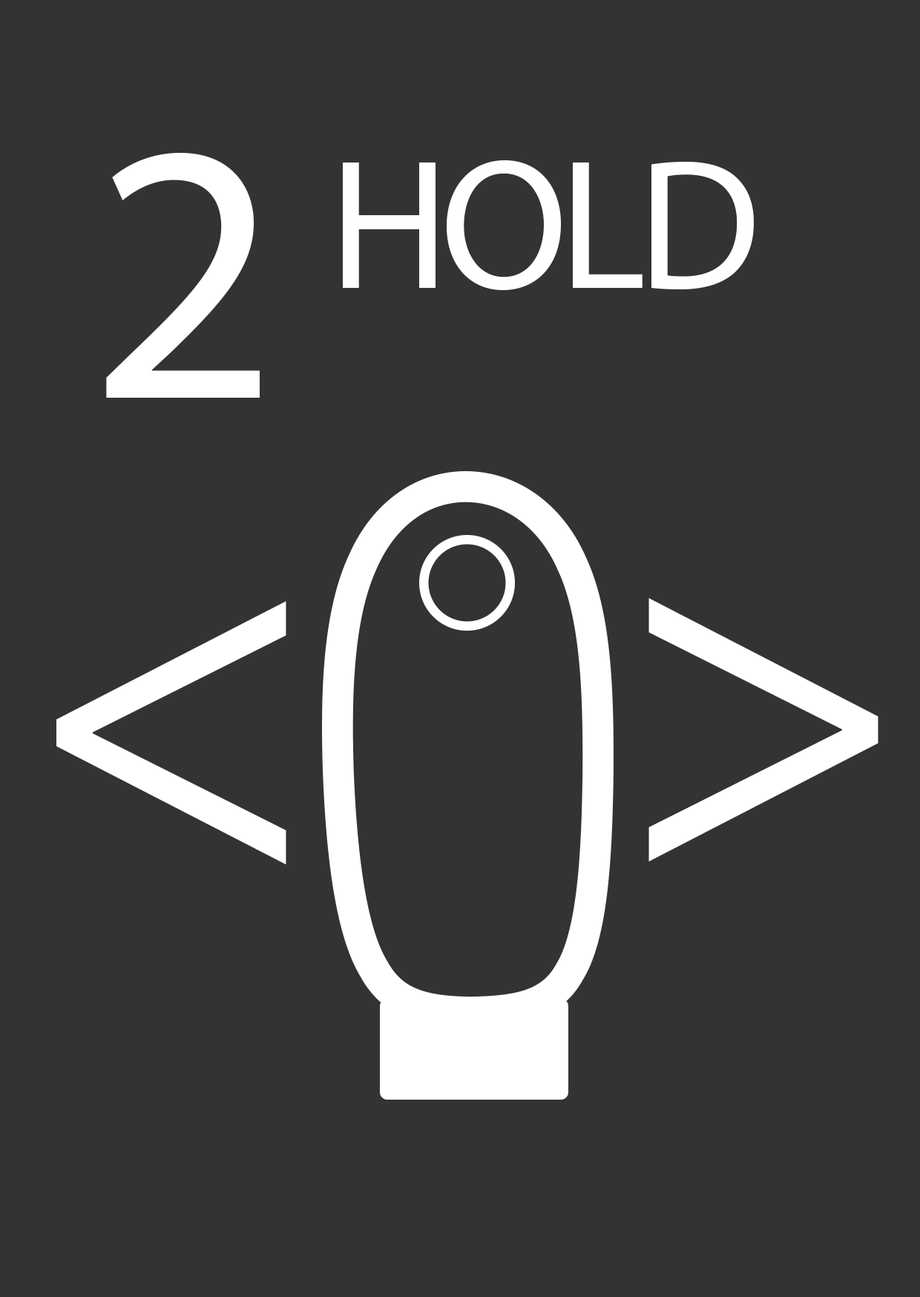
<style>
.page{position:relative;width:920px;height:1297px;background:#333333}
.page>*{position:absolute;margin:0}
.t1{font:370.9px "MyriadPro-Regular";letter-spacing:-0.15em;color:#ffffff}
.t2{font:185.4px "MyriadPro-Regular";letter-spacing:-0.05em;color:#ffffff}
.t3{font:494.5px "MyriadPro-Regular";letter-spacing:-0.15em;color:#ffffff}
.t4{font:494.7px "MyriadPro-Regular";letter-spacing:-0.15em;color:#ffffff}
</style>
<div class="page">
<p class="t1" style="left:106px;top:153px;width:154px;height:245px">2</p>
<p class="t2" style="left:343px;top:160px;width:411px;height:130px">HOLD</p>
<p class="t3" style="left:56px;top:601px;width:230px;height:263px">&lt;</p>
<p class="t4" style="left:648px;top:598px;width:230px;height:263px;rotate:180deg">&lt;</p>
</div>
